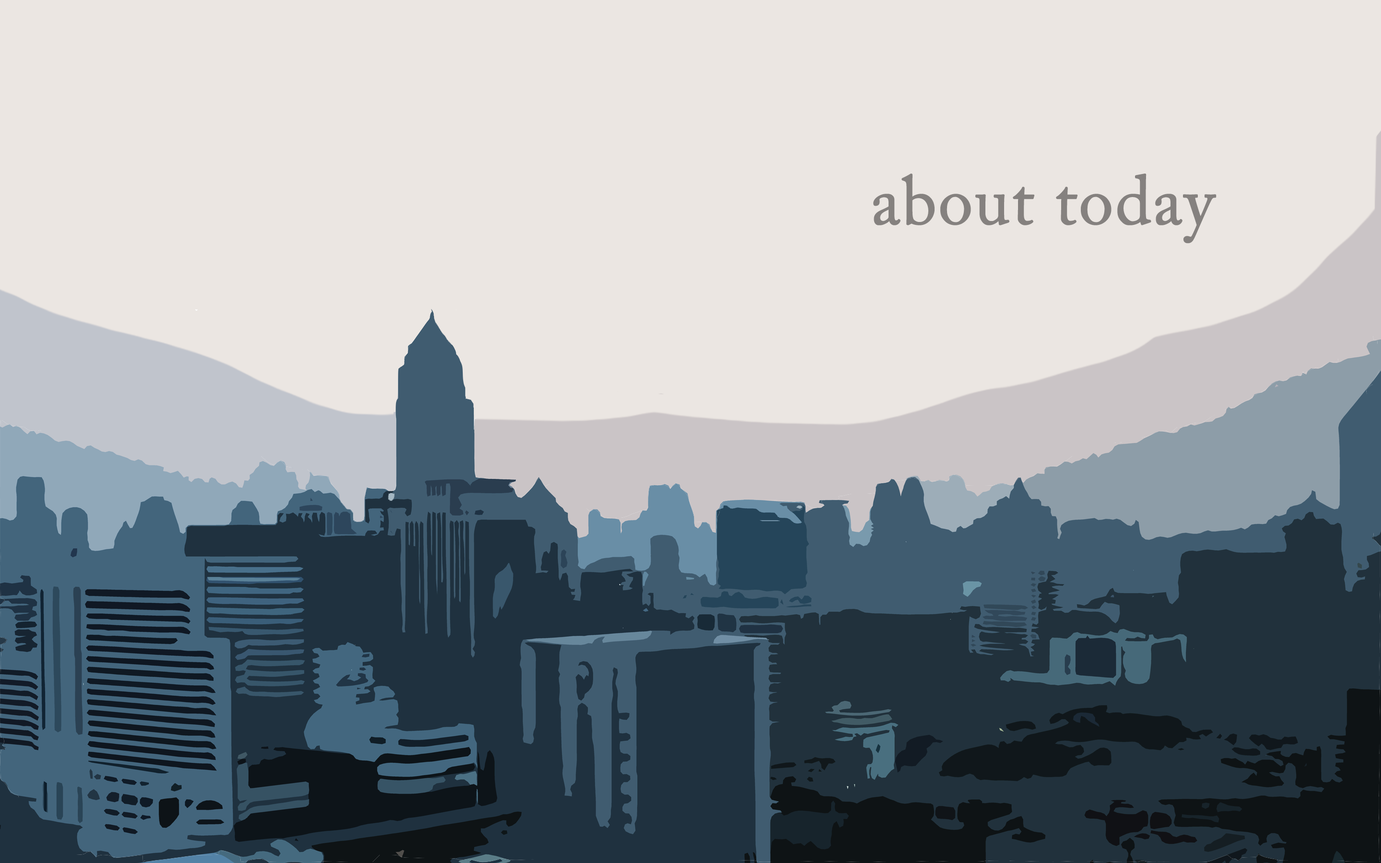
<style>
.page{position:relative;width:1381px;height:863px;background:#ebe6e2}
.page>*{position:absolute;margin:0}
.t1{font:69.1px "ACaslonPro-Regular";color:#85817f;font-weight:bold}
</style>
<div class="page">
<p class="t1" style="left:873px;top:174px;width:344px;height:70px">about today</p>
</div>
